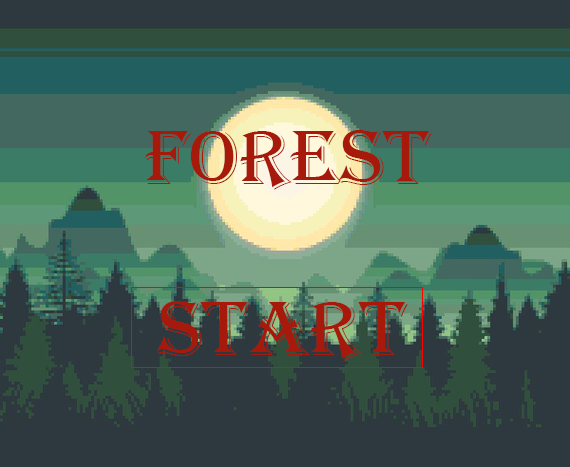
<style>
.page{position:relative;width:570px;height:467px;background:#2e393f}
.page>*{position:absolute;margin:0}
.t1{font:80px "Algerian";color:#a7190b}
</style>
<div class="page">
<p class="t1" style="left:145px;top:130px;width:287px;height:60px">Forest</p>
<p class="t1" style="left:157px;top:301px;width:251px;height:60px">Start</p>
</div>
